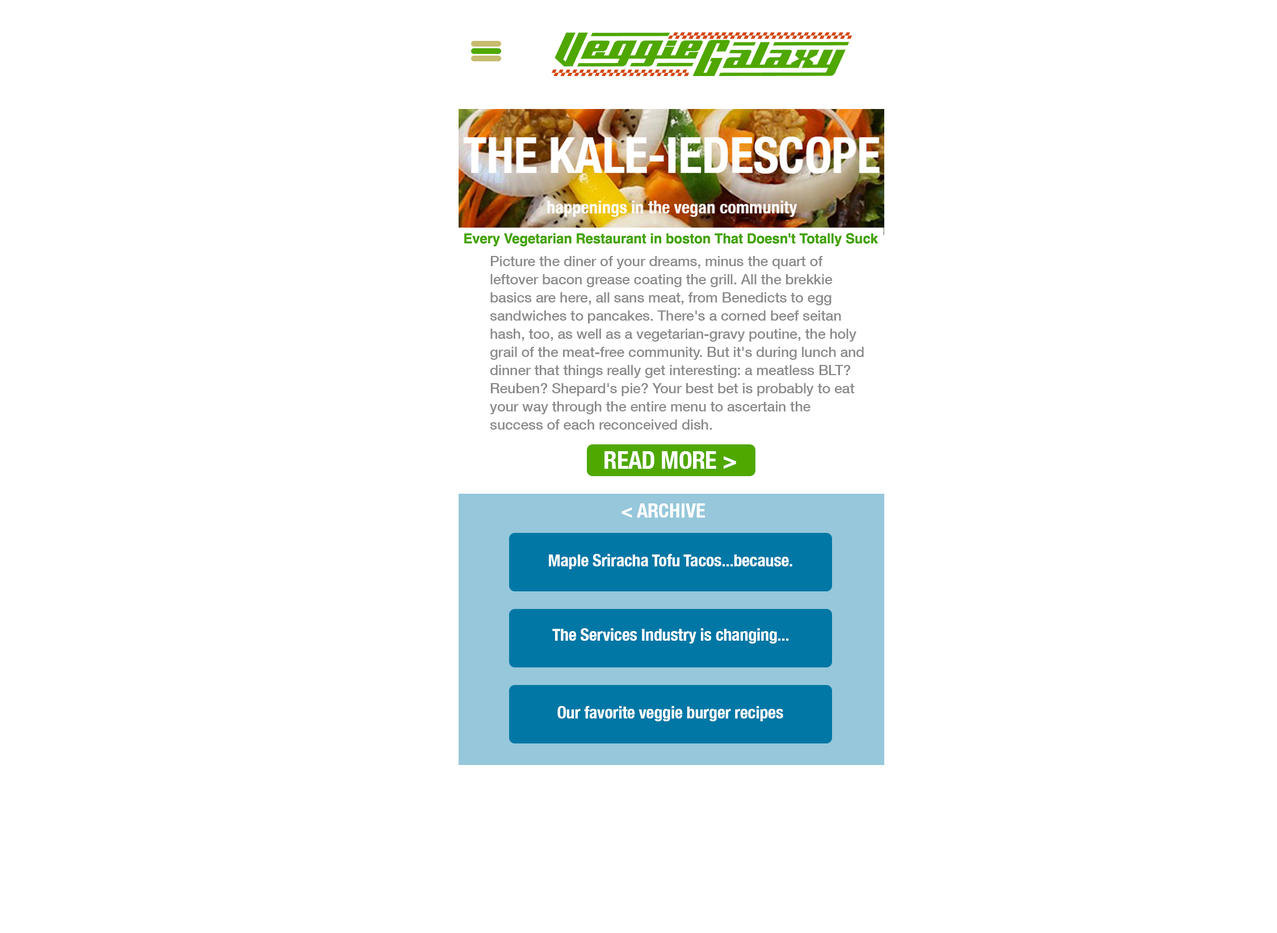
<style>
.page{position:relative;width:1277px;height:933px;background:#ffffff}
.page>*{position:absolute;margin:0}
.t1{font:14.2px/18.2px "HelveticaNeue-Medium";letter-spacing:-0.007em;color:#8a8a8a}
.t2{font:24.4px "HelveticaNeue-CondensedBold";letter-spacing:-0.007em;color:#ffffff}
.t3{font:20.1px "HelveticaNeue-CondensedBold";letter-spacing:-0.007em;color:#ffffff}
.t4{font:17px "HelveticaNeue-CondensedBold";letter-spacing:-0.007em;color:#ffffff}
</style>
<div class="page">
<p class="t1" style="left:490px;top:256px;width:374px;height:174px">Picture the diner of your dreams, minus the quart of leftover bacon grease coating the grill. All the brekkie basics are here, all sans meat, from Benedicts to egg sandwiches to pancakes. There's a corned beef seitan hash, too, as well as a vegetarian-gravy poutine, the holy grail of the meat-free community. But it's during lunch and dinner that things really get interesting: a meatless BLT? Reuben? Shepard's pie? Your best bet is probably to eat your way through the entire menu to ascertain the success of each reconceived dish.</p>
<p class="t2" style="left:605px;top:451px;width:131px;height:18px">READ MORE &gt;</p>
<p class="t3" style="left:622px;top:504px;width:83px;height:14px">&lt; ARCHIVE</p>
<p class="t4" style="left:549px;top:554px;width:244px;height:15px">Maple Sriracha Tofu Tacos...because.</p>
<p class="t4" style="left:552px;top:629px;width:237px;height:15px">The Services Industry is changing...</p>
<p class="t4" style="left:558px;top:706px;width:226px;height:16px">Our favorite veggie burger recipes</p>
</div>
